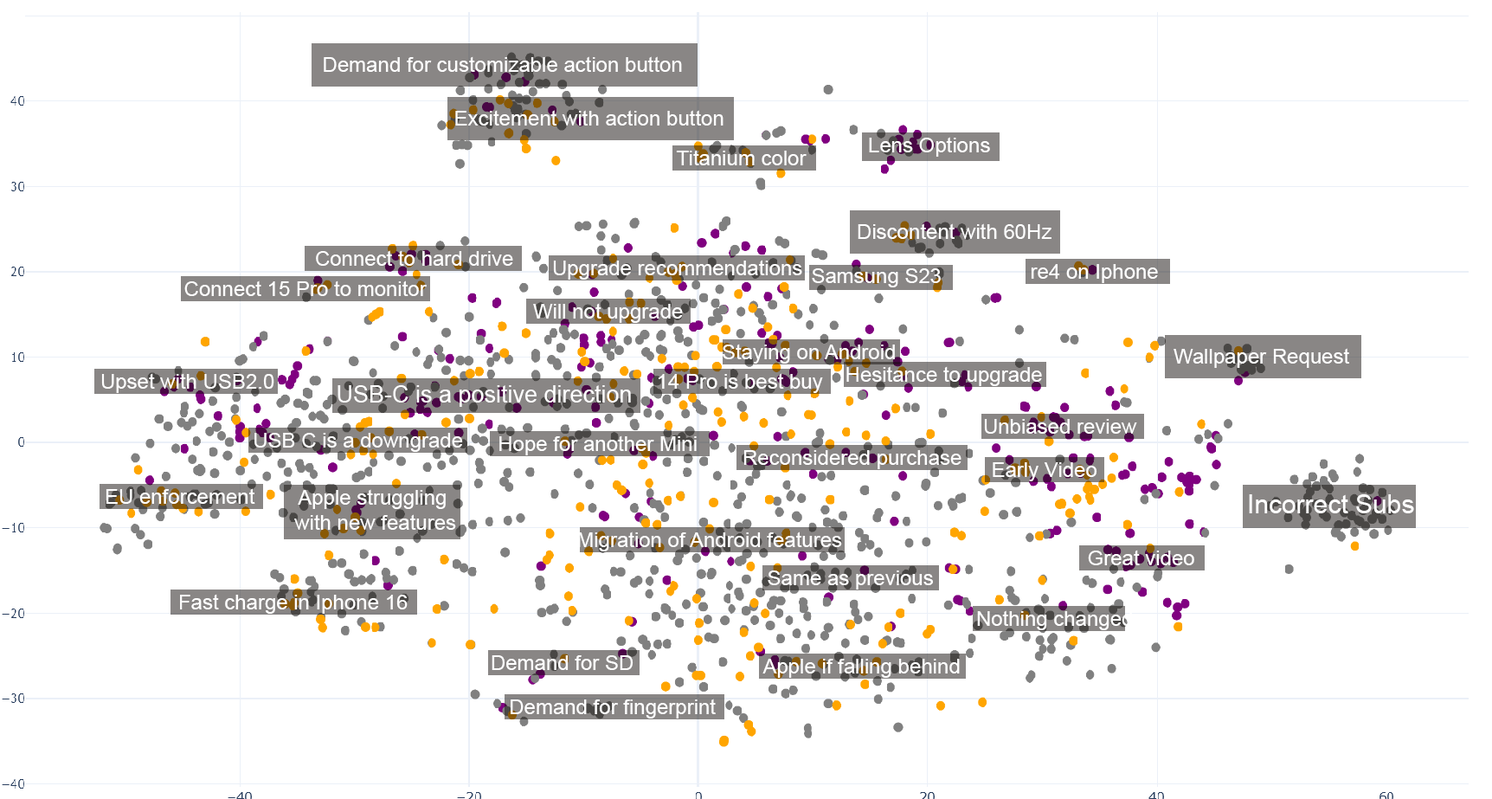
<style>
.page{position:relative;width:1492px;height:799px;background:#ffffff}
.page>*{position:absolute;margin:0}
.t1{font:20.8px "ArialMT";color:#ffffff}
.t2{font:23.4px "ArialMT";color:#ffffff}
.t3{font:26px "ArialMT";color:#ffffff}
</style>
<div class="page">
<p class="t1" style="left:324px;top:56px;width:358px;height:16px">Demand for customizable action button</p>
<p class="t1" style="left:455px;top:110px;width:269px;height:16px">Excitement with action button</p>
<p class="t1" style="left:869px;top:137px;width:121px;height:20px">Lens Options</p>
<p class="t1" style="left:676px;top:150px;width:131px;height:15px">Titanium color</p>
<p class="t1" style="left:858px;top:223px;width:194px;height:16px">Discontent with 60Hz</p>
<p class="t1" style="left:316px;top:250px;width:197px;height:16px">Connect to hard drive</p>
<p class="t1" style="left:553px;top:260px;width:249px;height:20px">Upgrade recommendations</p>
<p class="t1" style="left:812px;top:268px;width:129px;height:19px">Samsung S23</p>
<p class="t1" style="left:1031px;top:264px;width:127px;height:19px">re4 on Iphone</p>
<p class="t1" style="left:184px;top:280px;width:243px;height:16px">Connect 15 Pro to monitor</p>
<p class="t1" style="left:533px;top:303px;width:150px;height:20px">Will not upgrade</p>
<p class="t1" style="left:723px;top:344px;width:172px;height:20px">Staying on Android</p>
<p class="t1" style="left:1174px;top:348px;width:176px;height:20px">Wallpaper Request</p>
<p class="t1" style="left:101px;top:373px;width:173px;height:20px">Upset with USB2.0</p>
<p class="t1" style="left:659px;top:373px;width:164px;height:20px">14 Pro is best buy</p>
<p class="t1" style="left:847px;top:366px;width:195px;height:20px">Hesitance to upgrade</p>
<p class="t2" style="left:338px;top:385px;width:293px;height:22px">USB-C is a positive direction</p>
<p class="t1" style="left:984px;top:419px;width:153px;height:15px">Unbiased review</p>
<p class="t1" style="left:255px;top:433px;width:208px;height:19px">USB C is a downgrade</p>
<p class="t1" style="left:499px;top:435px;width:198px;height:20px">Hope for another Mini</p>
<p class="t1" style="left:744px;top:450px;width:218px;height:19px">Reconsidered purchase</p>
<p class="t1" style="left:993px;top:462px;width:105px;height:19px">Early Video</p>
<p class="t1" style="left:106px;top:488px;width:149px;height:16px">EU enforcement</p>
<p class="t1" style="left:294px;top:489px;width:162px;height:41px;text-align:center">Apple struggling <br>with new features</p>
<p class="t3" style="left:1249px;top:494px;width:165px;height:19px">Incorrect Subs</p>
<p class="t1" style="left:577px;top:532px;width:265px;height:19px">Migration of Android features</p>
<p class="t1" style="left:1088px;top:550px;width:107px;height:15px">Great video</p>
<p class="t1" style="left:768px;top:570px;width:165px;height:20px">Same as previous</p>
<p class="t1" style="left:180px;top:594px;width:228px;height:20px">Fast charge in Iphone 16</p>
<p class="t1" style="left:977px;top:610px;width:155px;height:20px">Nothing changed</p>
<p class="t1" style="left:492px;top:655px;width:142px;height:15px">Demand for SD</p>
<p class="t1" style="left:763px;top:659px;width:197px;height:19px">Apple if falling behind</p>
<p class="t1" style="left:511px;top:699px;width:205px;height:19px">Demand for fingerprint</p>
</div>
